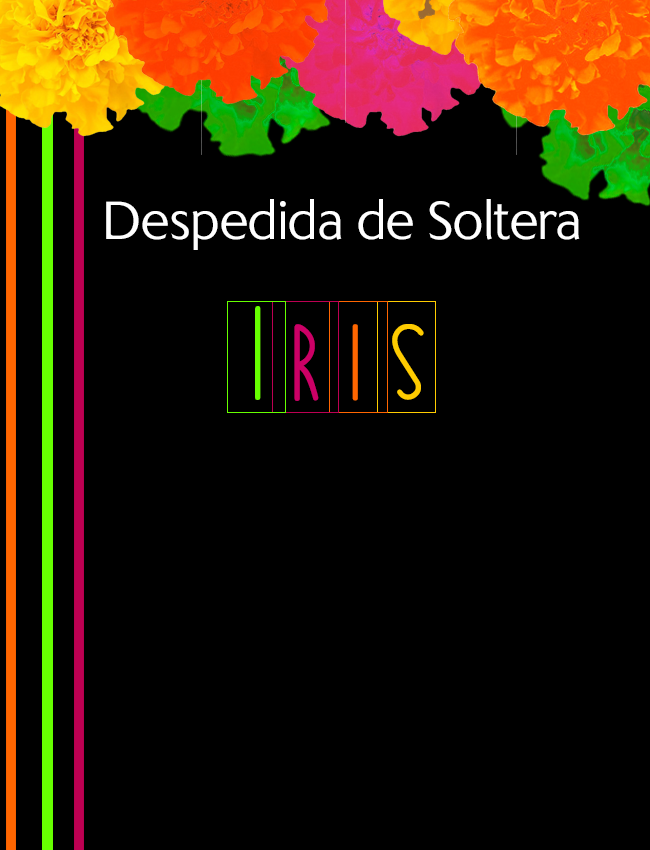
<style>
.page{position:relative;width:650px;height:850px;background:#000000}
.page>*{position:absolute;margin:0}
.t1{font:50px "KindersleySans";letter-spacing:-0.025em;color:#ffffff}
.t2{font:125px "BittersweetNF";letter-spacing:-0.025em;color:#66ff00}
.t3{font:125px "BittersweetNF";letter-spacing:-0.025em;color:#cc0066}
.t4{font:125px "BittersweetNF";letter-spacing:-0.025em;color:#ff6600}
.t5{font:125px "BittersweetNF";letter-spacing:-0.025em;color:#ffcc00}
</style>
<div class="page">
<p class="t1" style="left:106px;top:199px;width:474px;height:51px">Despedida de Soltera</p>
<p class="t2" style="left:255px;top:306px;width:169px;height:95px">I <span class="t3">r </span><span class="t4">i </span><span class="t5">s</span></p>
</div>
